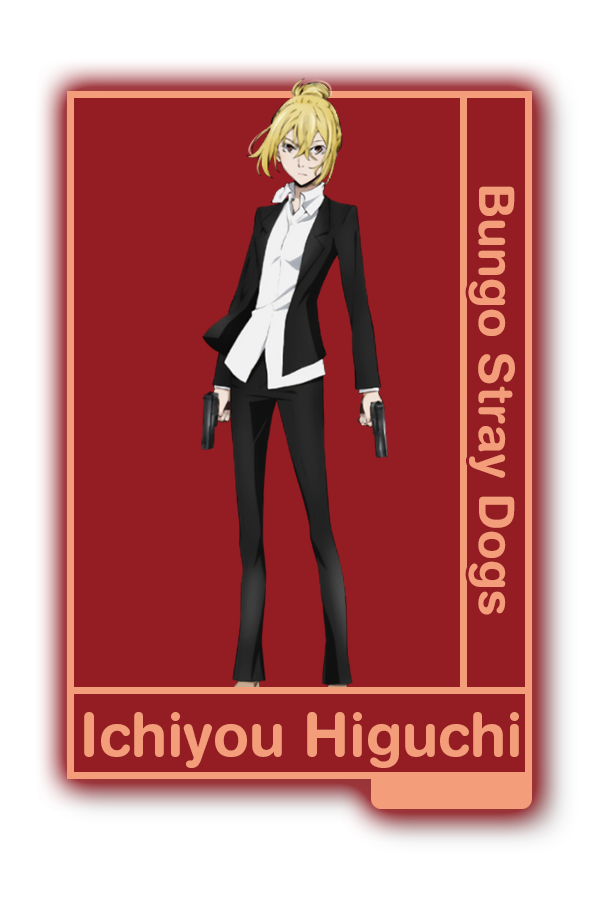
<style>
.page{position:relative;width:600px;height:900px;background:#941d23}
.page>*{position:absolute;margin:0}
.t1{font:48.8px "HelveticaRounded-Bold";color:#f39d7b}
.t2{font:59.2px "HelveticaRounded-Bold";color:#f39d7b}
</style>
<div class="page">
<p class="t1" style="left:468px;top:186px;width:47px;height:429px;rotate:90deg">Bungo Stray Dogs</p>
<p class="t2" style="left:84px;top:712px;width:435px;height:56px">Ichiyou Higuchi</p>
</div>
